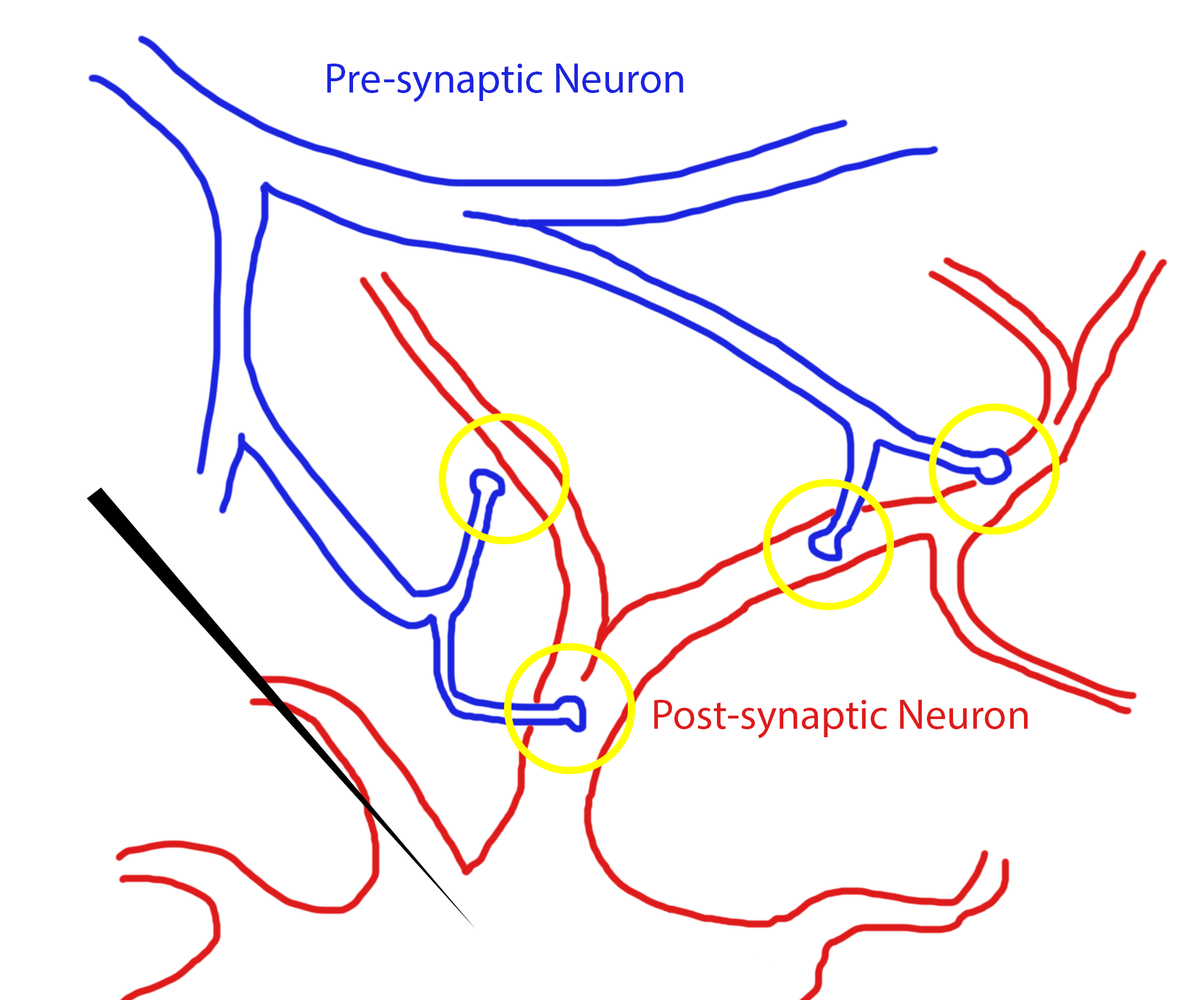
<style>
.page{position:relative;width:1192px;height:1000px;background:#ffffff}
.page>*{position:absolute;margin:0}
.t1{font:42.6px "MyriadPro-Regular";color:#1b24de}
.t2{font:42.6px "MyriadPro-Regular";color:#de1b1b}
</style>
<div class="page">
<p class="t1" style="left:327px;top:64px;width:356px;height:38px">Pre-synaptic Neuron</p>
<p class="t2" style="left:654px;top:700px;width:374px;height:39px">Post-synaptic Neuron</p>
</div>
